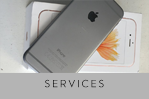
<style>
.page{position:relative;width:149px;height:99px;background:#b4b4b4}
.page>*{position:absolute;margin:0}
.t1{font:10px "Pasajero"}
</style>
<div class="page">
<p class="t1" style="left:45px;top:79px;width:59px;height:9px">s e r v i c e s</p>
</div>
